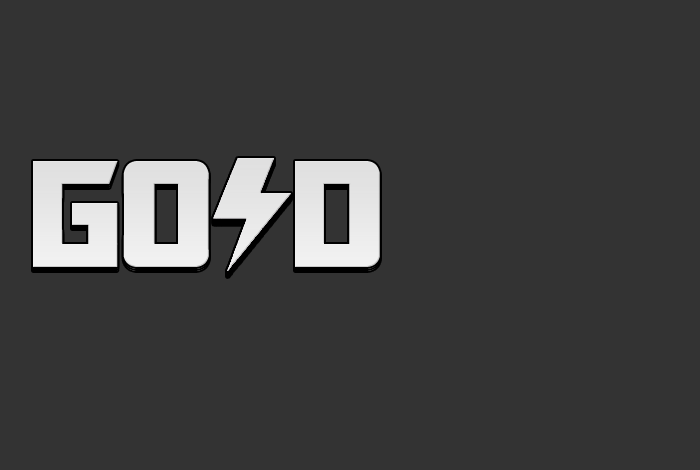
<style>
.page{position:relative;width:700px;height:470px;background:#333333}
.page>*{position:absolute;margin:0}
.t1{font:170px "TransformersMovie";color:#e7e7e7}
</style>
<div class="page">
<p class="t1" style="left:33px;top:161px;width:347px;height:106px">GO D</p>
<p class="t1" style="left:33px;top:165px;width:347px;height:106px">GO D</p>
<p class="t1" style="left:33px;top:163px;width:347px;height:106px">GO D</p>
</div>
